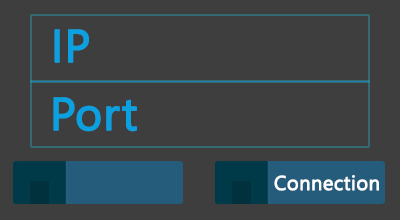
<style>
.page{position:relative;width:400px;height:220px;background:#3f3e3e}
.page>*{position:absolute;margin:0}
.t1{font:45.8px "SegoeUI";color:#0ba1e0;font-weight:bold}
.t2{font:20px "SegoeUI";color:#ffffff;font-weight:bold}
</style>
<div class="page">
<p class="t1" style="left:54px;top:29px;width:35px;height:34px">IP</p>
<p class="t1" style="left:53px;top:97px;width:84px;height:35px">Port</p>
<p class="t2" style="left:274px;top:175px;width:105px;height:16px">Connection</p>
</div>
